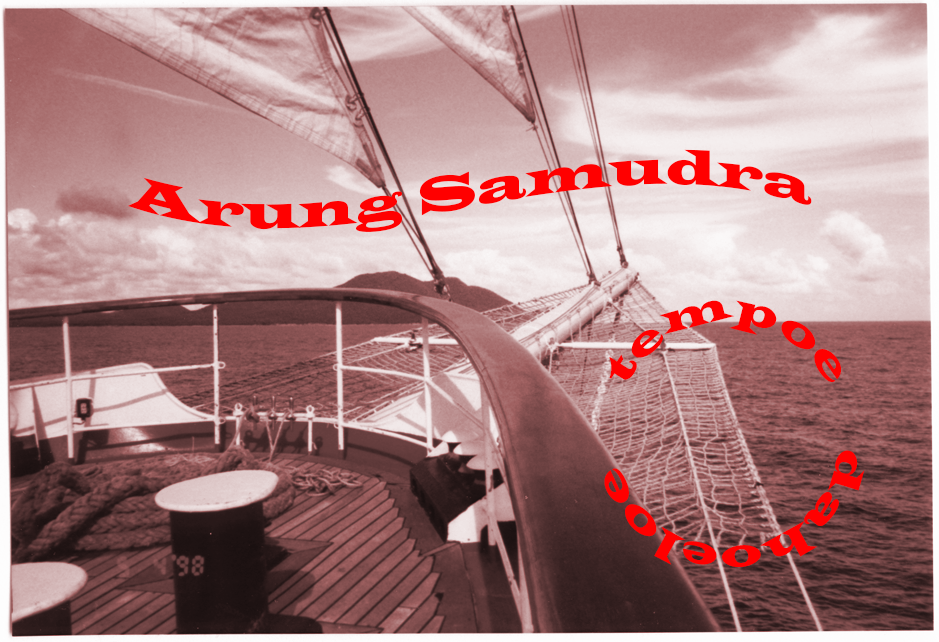
<style>
.page{position:relative;width:939px;height:642px}
.page>*{position:absolute;margin:0}
.t1{font:50px "LatinWide";color:#ff0000}
.t2{font:41.7px "LatinWide";color:#ff0000}
</style>
<div class="page">
<p class="t1" style="left:128px;top:149px;width:684px;height:83px">Arung Samudra</p>
<p class="t2" style="left:604px;top:300px;width:261px;height:267px">tempoe     dahoeloe</p>
</div>
